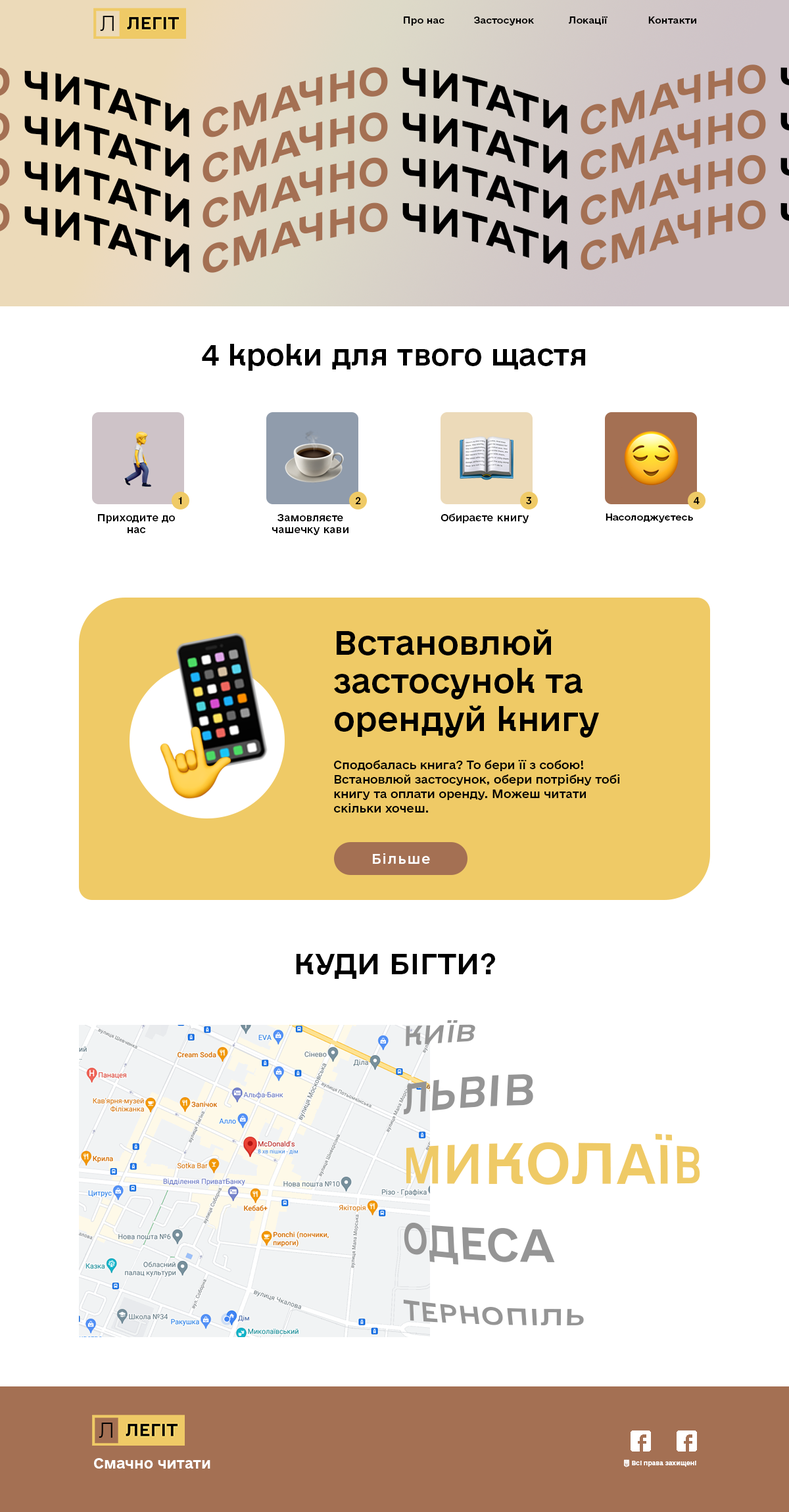
<style>
.page{position:relative;width:789px;height:1512px;background:#ffffff}
.page>*{position:absolute;margin:0}
.t1{font:9.2px "e-Ukraine-Medium";color:#000000}
.t2{font:37.7px "e-UkraineHead-Bold";color:#a47053}
.t3{font:37.7px "e-UkraineHead-Bold";color:#000000}
.t4{font:27.6px "e-UkraineHead-Medium";color:#000000}
.t5{font:9.9px "e-Ukraine-Medium";color:#000000}
.t6{font:31.6px/38.1px "e-UkraineHead-Medium";color:#000000}
.t7{font:11.2px/14.5px "e-Ukraine-Medium";color:#000000}
.t8{font:13.1px "e-Ukraine-Medium";letter-spacing:0.09em;color:#ffffff}
.t9{font:27.6px/68.4px "e-UkraineHead-Medium";color:#959595}
.t10{font:39.4px/68.4px "e-UkraineHead-Medium";color:#959595}
.t11{font:47.3px/68.4px "e-UkraineHead-Medium";color:#efca66}
.t12{font:13.8px "e-UkraineHead-Bold";color:#ffffff}
.t13{font:5.9px "e-Ukraine-Bold";color:#ffffff}
</style>
<div class="page">
<p class="t1" style="left:404px;top:16px;width:292px;height:10px">Про нас  Застосунок  Локації  Контакти</p>
<p class="t2" style="left:580px;top:64px;width:186px;height:206px;text-align:right">СМАЧНО<br>СМАЧНО<br>СМАЧНО<br>СМАЧНО</p>
<p class="t3" style="left:24px;top:70px;width:165px;height:203px">ЧИТАТИ<br>ЧИТАТИ<br>ЧИТАТИ<br>ЧИТАТИ</p>
<p class="t2" style="left:202px;top:67px;width:186px;height:206px;text-align:right">СМАЧНО<br>СМАЧНО<br>СМАЧНО<br>СМАЧНО</p>
<p class="t3" style="left:402px;top:67px;width:165px;height:203px">ЧИТАТИ<br>ЧИТАТИ<br>ЧИТАТИ<br>ЧИТАТИ</p>
<p class="t4" style="left:202px;top:344px;width:383px;height:27px">4 кроки для твого щастя</p>
<p class="t1" style="left:178px;top:497px;width:4px;height:7px">1</p>
<p class="t1" style="left:355px;top:497px;width:6px;height:7px">2</p>
<p class="t1" style="left:526px;top:497px;width:6px;height:7px">3</p>
<p class="t1" style="left:693px;top:497px;width:6px;height:7px">4</p>
<p class="t5" style="left:98px;top:514px;width:77px;height:19px;text-align:center">Приходите до нас</p>
<p class="t5" style="left:272px;top:514px;width:76px;height:21px;text-align:center">Замовляєте чашечку кави</p>
<p class="t5" style="left:440px;top:513px;width:89px;height:10px">Обираєте книгу</p>
<p class="t1" style="left:605px;top:513px;width:88px;height:10px">Насолоджуєтесь</p>
<p class="t6" style="left:334px;top:629px;width:265px;height:108px">Встановлюй застосунок та орендуй книгу</p>
<p class="t7" style="left:334px;top:760px;width:285px;height:52px">Сподобалась книга? То бери її з собою! Встановлюй застосунок, обери потрібну тобі книгу та оплати оренду. Можеш читати скільки хочеш.</p>
<p class="t8" style="left:373px;top:853px;width:57px;height:11px">Більше</p>
<p class="t4" style="left:296px;top:953px;width:199px;height:26px">КУДИ БІГТИ?</p>
<p class="t9" style="left:403px;top:1019px;width:297px;height:307px">КИЇВ<br><span class="t10">ЛЬВІВ<br></span><span class="t11">МИКОЛАЇВ<br></span><span class="t10">ОДЕСА<br></span>ТЕРНОПІЛЬ</p>
<p class="t12" style="left:94px;top:1458px;width:116px;height:10px">Смачно читати</p>
<p class="t13" style="left:624px;top:1459px;width:72px;height:8px">Ⓒ Всі права захищені</p>
</div>
